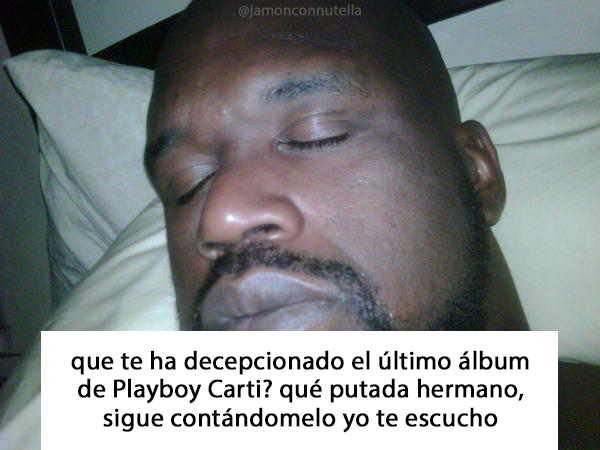
<style>
.page{position:relative;width:600px;height:450px}
.page>*{position:absolute;margin:0}
.t1{font:15px "MyriadPro-Regular";color:#525050;font-weight:bold}
.t2{font:25.7px "MyriadPro-Regular";color:#000000;font-weight:bold}
</style>
<div class="page">
<p class="t1" style="left:238px;top:4px;width:123px;height:15px">@jamonconnutella</p>
<p class="t2" style="left:71px;top:350px;width:458px;height:83px;text-align:center">que te ha decepcionado el último álbum<br>de Playboy Carti? qué putada hermano,<br>sigue contándomelo yo te escucho</p>
</div>
